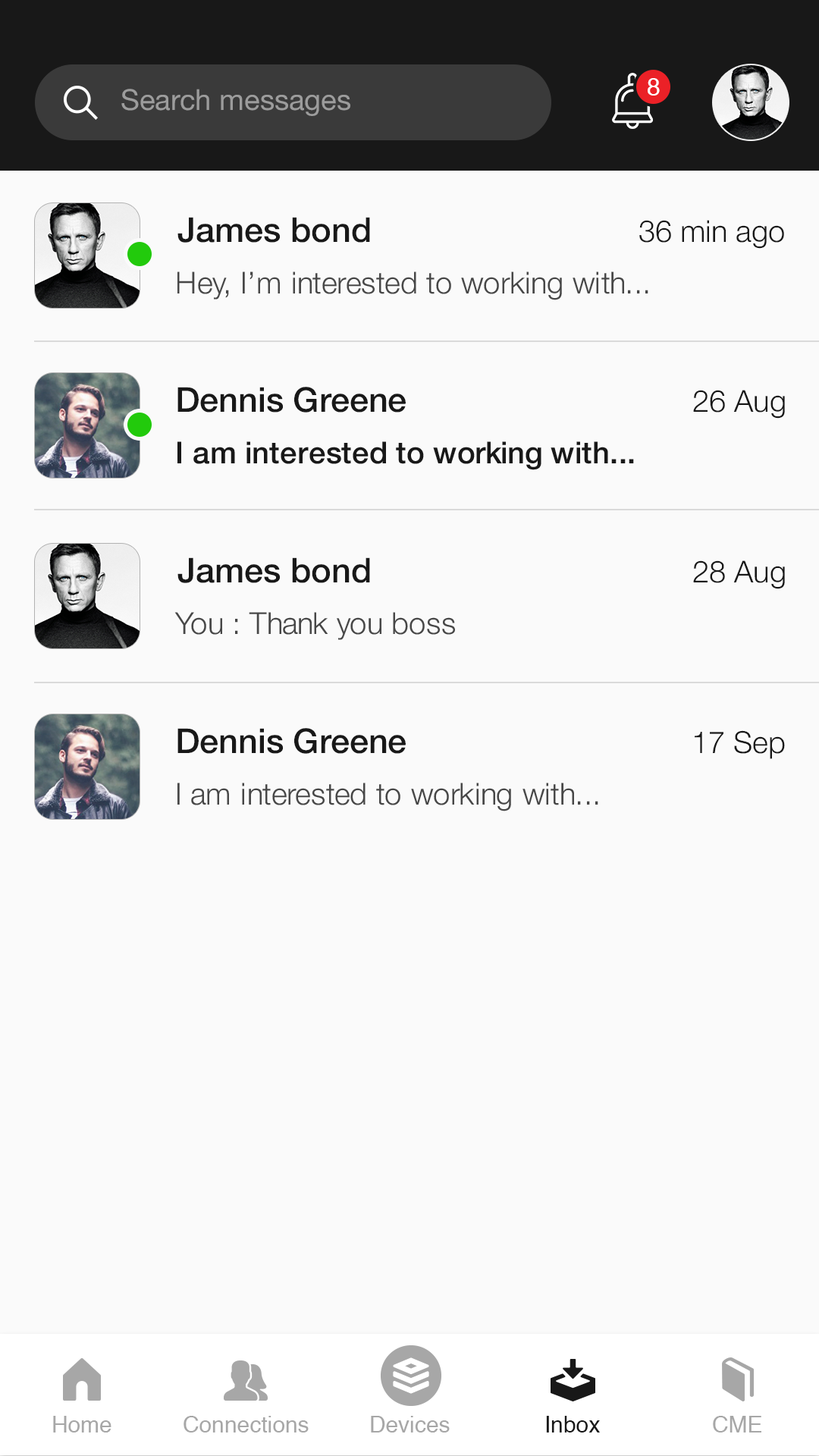
<style>
.page{position:relative;width:819px;height:1456px;background:#fafafa}
.page>*{position:absolute;margin:0}
.t1{font:28.8px "HelveticaNeue";color:#9c9c9c}
.t2{font:24.3px "Helvetica";color:#ffffff}
.t3{font:34.1px "HelveticaNeue-Medium";color:#181818}
.t4{font:30.3px "HelveticaNeue-Light";color:#181818}
.t5{font:30.3px "HelveticaNeue-Light";color:#474747}
.t6{font:30.3px "HelveticaNeue-Medium";color:#181818}
.t7{font:22.7px "Helvetica";color:#a7a7a7}
.t8{font:22.7px "Helvetica";color:#181818}
</style>
<div class="page">
<p class="t1" style="left:121px;top:89px;width:229px;height:27px">Search messages</p>
<p class="t2" style="left:648px;top:78px;width:12px;height:18px">8</p>
<p class="t3" style="left:177px;top:217px;width:193px;height:26px">James bond</p>
<p class="t4" style="left:639px;top:220px;width:145px;height:29px">36 min ago</p>
<p class="t5" style="left:177px;top:271px;width:471px;height:29px">Hey, I’m interested to working with...</p>
<p class="t3" style="left:177px;top:387px;width:229px;height:26px">Dennis Greene</p>
<p class="t4" style="left:693px;top:390px;width:92px;height:29px">26 Aug</p>
<p class="t6" style="left:177px;top:441px;width:457px;height:29px">I am interested to working with...</p>
<p class="t3" style="left:177px;top:557px;width:193px;height:26px">James bond</p>
<p class="t4" style="left:693px;top:560px;width:92px;height:29px">28 Aug</p>
<p class="t5" style="left:174px;top:612px;width:281px;height:28px">You : Thank you boss</p>
<p class="t3" style="left:177px;top:728px;width:229px;height:26px">Dennis Greene</p>
<p class="t4" style="left:695px;top:730px;width:90px;height:29px">17 Sep</p>
<p class="t5" style="left:177px;top:783px;width:421px;height:28px">I am interested to working with...</p>
<p class="t7" style="left:53px;top:1416px;width:58px;height:16px">Home</p>
<p class="t7" style="left:184px;top:1416px;width:125px;height:16px">Connections</p>
<p class="t7" style="left:371px;top:1416px;width:79px;height:16px">Devices</p>
<p class="t8" style="left:546px;top:1416px;width:54px;height:16px">Inbox</p>
<p class="t7" style="left:713px;top:1416px;width:48px;height:16px">CME</p>
</div>
